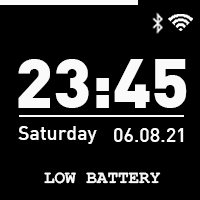
<style>
.page{position:relative;width:200px;height:200px;background:#000000}
.page>*{position:absolute;margin:0}
.t1{font:68.5px "DIN-Black";color:#fafafa}
.t2{font:19.6px "DIN-Medium";color:#fafafa}
.t3{font:17.6px "FreeMonoBold";color:#fafafa}
</style>
<div class="page">
<p class="t1" style="left:18px;top:59px;width:169px;height:49px">23:45</p>
<p class="t2" style="left:18px;top:126px;width:79px;height:18px">Saturday</p>
<p class="t2" style="left:114px;top:128px;width:70px;height:14px">06.08.21</p>
<p class="t3" style="left:44px;top:172px;width:117px;height:12px">LOW BATTERY</p>
</div>
